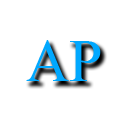
<style>
.page{position:relative;width:128px;height:128px;background:#ffffff}
.page>*{position:absolute;margin:0}
.t1{font:60px "TimesNewRomanPSMT";color:#00a8ff}
</style>
<div class="page">
<p class="t1" style="left:26px;top:40px;width:75px;height:41px">AP</p>
</div>
